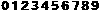
<style>
.page{position:relative;width:100px;height:10px;background:#ffffff}
.page>*{position:absolute;margin:0}
.t1{font:13.3px "FZZYJW--GB1-0";letter-spacing:-0.04em;color:#000000;font-weight:bold}
</style>
<div class="page">
<p class="t1" style="left:1px;top:1px;width:8px;height:9px">0</p>
<p class="t1" style="left:12px;top:1px;width:5px;height:9px">1</p>
<p class="t1" style="left:21px;top:1px;width:8px;height:9px">2</p>
<p class="t1" style="left:31px;top:1px;width:8px;height:9px">3</p>
<p class="t1" style="left:41px;top:1px;width:8px;height:9px">4</p>
<p class="t1" style="left:51px;top:1px;width:8px;height:9px">5</p>
<p class="t1" style="left:61px;top:1px;width:8px;height:9px">67</p>
<p class="t1" style="left:72px;top:1px;width:7px;height:9px">7</p>
<p class="t1" style="left:81px;top:1px;width:8px;height:9px">8</p>
<p class="t1" style="left:91px;top:1px;width:8px;height:9px">9</p>
</div>
